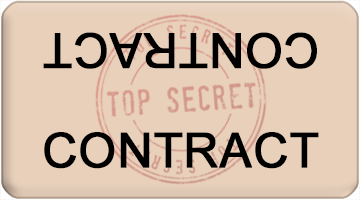
<style>
.page{position:relative;width:360px;height:200px;background:#e8d0bb}
.page>*{position:absolute;margin:0}
.t1{font:48px "ArialMT";color:#000000;font-weight:bold}
</style>
<div class="page">
<p class="t1" style="left:43px;top:32px;width:274px;height:37px;rotate:180deg">CONTRACT</p>
<p class="t1" style="left:44px;top:132px;width:275px;height:37px">CONTRACT</p>
</div>
